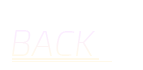
<style>
.page{position:relative;width:143px;height:70px;background:#ffffff}
.page>*{position:absolute;margin:0}
.t1{font:36px "Exo2-ExtraLightItalic";color:#fdf2f7}
</style>
<div class="page">
<p class="t1" style="left:12px;top:30px;width:83px;height:26px">BACK</p>
</div>
